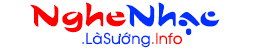
<style>
.page{position:relative;width:254px;height:49px;background:#ffffff}
.page>*{position:absolute;margin:0}
.t1{font:45px "UVNHoaDao";color:#ff0000}
.t2{font:45px "UVNHoaDao";color:#0030ff}
.t3{font:15px "VNI-Avo";color:#0030ff}
.t4{font:15px "VNI-Avo";color:#ff0000}
</style>
<div class="page">
<p class="t1" style="left:30px;top:2px;width:190px;height:33px">Nghe<span class="t2">Nhạc</span></p>
<p class="t3" style="left:82px;top:32px;width:100px;height:16px">.LaøSöôùng<span class="t4">.Info</span></p>
</div>
